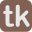
<style>
.page{position:relative;width:32px;height:32px;background:#816154}
.page>*{position:absolute;margin:0}
.t1{font:30px "ArialRoundedMTBold";color:#e7e7e7}
</style>
<div class="page">
<p class="t1" style="left:3px;top:4px;width:27px;height:23px">tk</p>
</div>
